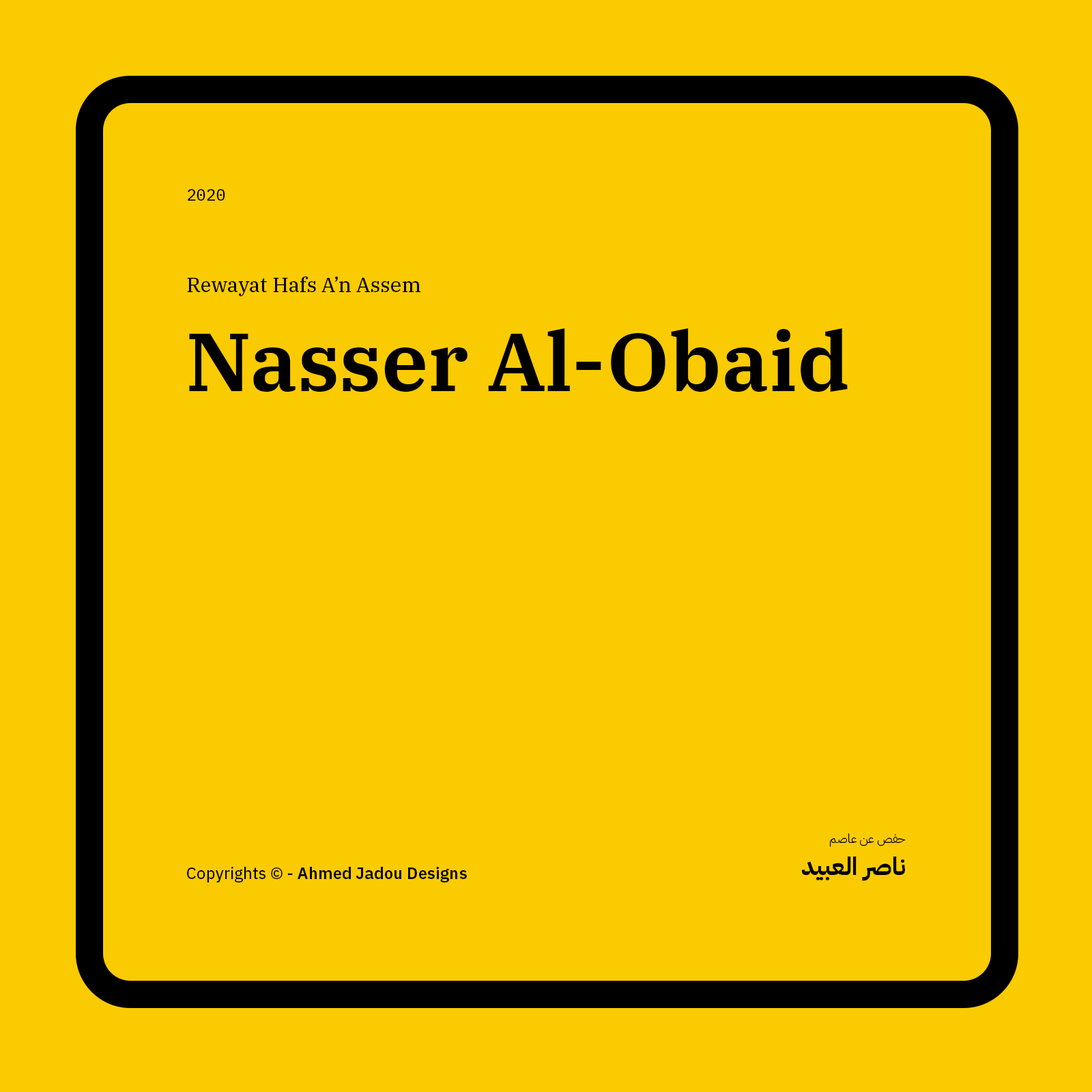
<style>
.page{position:relative;width:1092px;height:1092px;background:#facb00}
.page>*{position:absolute;margin:0}
.t1{font:16.4px "IBMPlexMono-Text";color:#000000}
.t2{font:20.5px "IBMPlexSerif-Text";color:#000000}
.t3{font:81.9px "IBMPlexSerif-SemiBold";color:#000000}
.t4{font:12.3px "IBMPlexArabic-Light";color:#000000}
.t5{font:24.6px "IBMPlexArabic-Bold";color:#000000}
.t6{font:16.4px "IBMPlexSans-SemiBold";color:#000000}
.t7{font:16.4px "IBMPlexSans-Text";color:#000000}
</style>
<div class="page">
<p class="t1" style="left:188px;top:189px;width:37px;height:12px">2020</p>
<p class="t2" style="left:187px;top:276px;width:233px;height:20px">Rewayat Hafs A’n Assem</p>
<p class="t3" style="left:189px;top:328px;width:659px;height:64px">Nasser Al-Obaid</p>
<p class="t4" style="left:830px;top:833px;width:76px;height:14px">حفص عن عاصم</p>
<p class="t5" style="left:802px;top:857px;width:103px;height:24px">ناصر العبيد</p>
<p class="t6" style="left:187px;top:867px;width:280px;height:15px"><span class="t7">Copyrights © - </span>Ahmed Jadou Designs</p>
</div>
